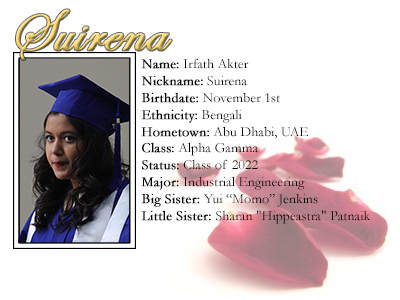
<style>
.page{position:relative;width:400px;height:300px;background:#ffffff}
.page>*{position:absolute;margin:0}
.t1{font:60px "EdwardianScriptITC";font-weight:bold}
.t2{font:14px "Garamond";color:#000000}
.t3{font:14px "Garamond";color:#000000;font-weight:bold}
</style>
<div class="page">
<p class="t1" style="left:16px;top:9px;width:156px;height:51px">Suirena</p>
<p class="t2" style="left:141px;top:58px;width:230px;height:166px"><span class="t3">Name:</span> Irfath Akter<br><span class="t3">Nickname:</span> Suirena<br><span class="t3">Birthdate:</span> November 1st<br><span class="t3">Ethnicity:</span> Bengali<br><span class="t3">Hometown:</span> Abu Dhabi, UAE<br><span class="t3">Class:</span> Alpha Gamma<br><span class="t3">Status:</span> Class of 2022<br><span class="t3">Major:</span> Industrial Engineering<br><span class="t3">Big Sister: </span>Yui “Momo” Jenkins<br><span class="t3">Little Sister: </span>Sharan "Hippeastra" Patnaik</p>
</div>
